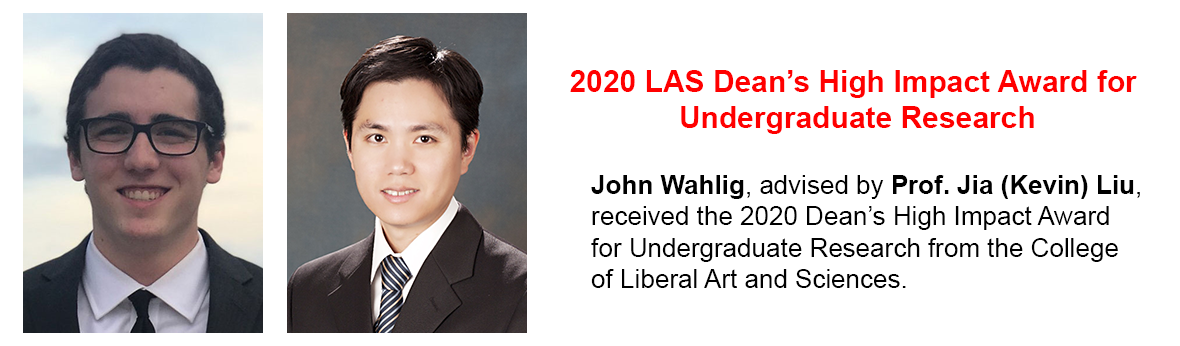
<style>
.page{position:relative;width:1180px;height:346px;background:#ffffff}
.page>*{position:absolute;margin:0}
.t1{font:30px "Arial-BoldMT";color:#ff0000}
.t2{font:26px "ArialMT";color:#000000}
.t3{font:26px "Arial-BoldMT";color:#000000}
</style>
<div class="page">
<p class="t1" style="left:570px;top:70px;width:567px;height:64px;text-align:center">2020 LAS Dean’s High Impact Award for <br>Undergraduate Research</p>
<p class="t2" style="left:591px;top:175px;width:549px;height:113px"><span class="t3">John Wahlig</span>, advised by <span class="t3">Prof. Jia (Kevin) Liu</span>,<br>received the 2020 Dean’s High Impact Award<br>for Undergraduate Research from the College<br>of Liberal Art and Sciences.</p>
</div>
